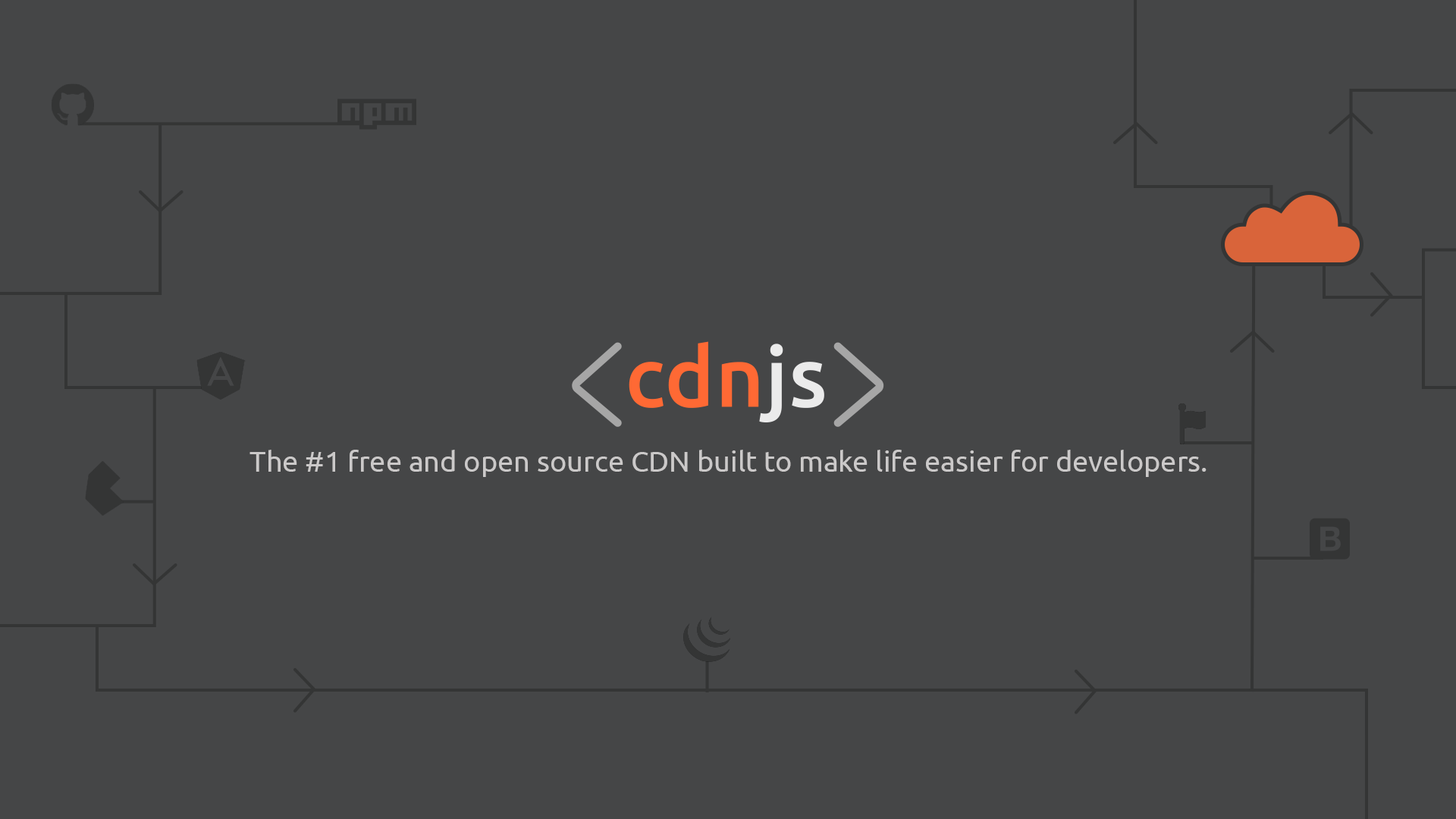
<style>
.page{position:relative;width:1456px;height:819px;background:#454647}
.page>*{position:absolute;margin:0}
.t1{font:28.8px "Ubuntu";color:#cbc9c9}
</style>
<div class="page">
<p class="t1" style="left:249px;top:450px;width:957px;height:27px">The #1 free and open source CDN built to make life easier for developers.</p>
</div>
